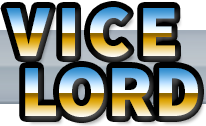
<style>
.page{position:relative;width:206px;height:126px}
.page>*{position:absolute;margin:0}
.t1{font:73.7px "SourceSansPro-Black";letter-spacing:0.1em}
.t2{font:73.7px "SourceSansPro-Black"}
</style>
<div class="page">
<p class="t1" style="left:6px;top:7px;width:169px;height:50px">VICE</p>
<p class="t2" style="left:25px;top:67px;width:173px;height:50px">LORD</p>
</div>
